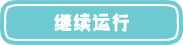
<style>
.page{position:relative;width:183px;height:45px;background:#6ecad0}
.page>*{position:absolute;margin:0}
.t1{font:12px "shetumodengxiaofangti";color:#ffffff;font-weight:bold;scale:0.94 1}
</style>
<div class="page">
<p class="t1" style="left:54px;top:13px;width:76px;height:19px">继续运行</p>
</div>
